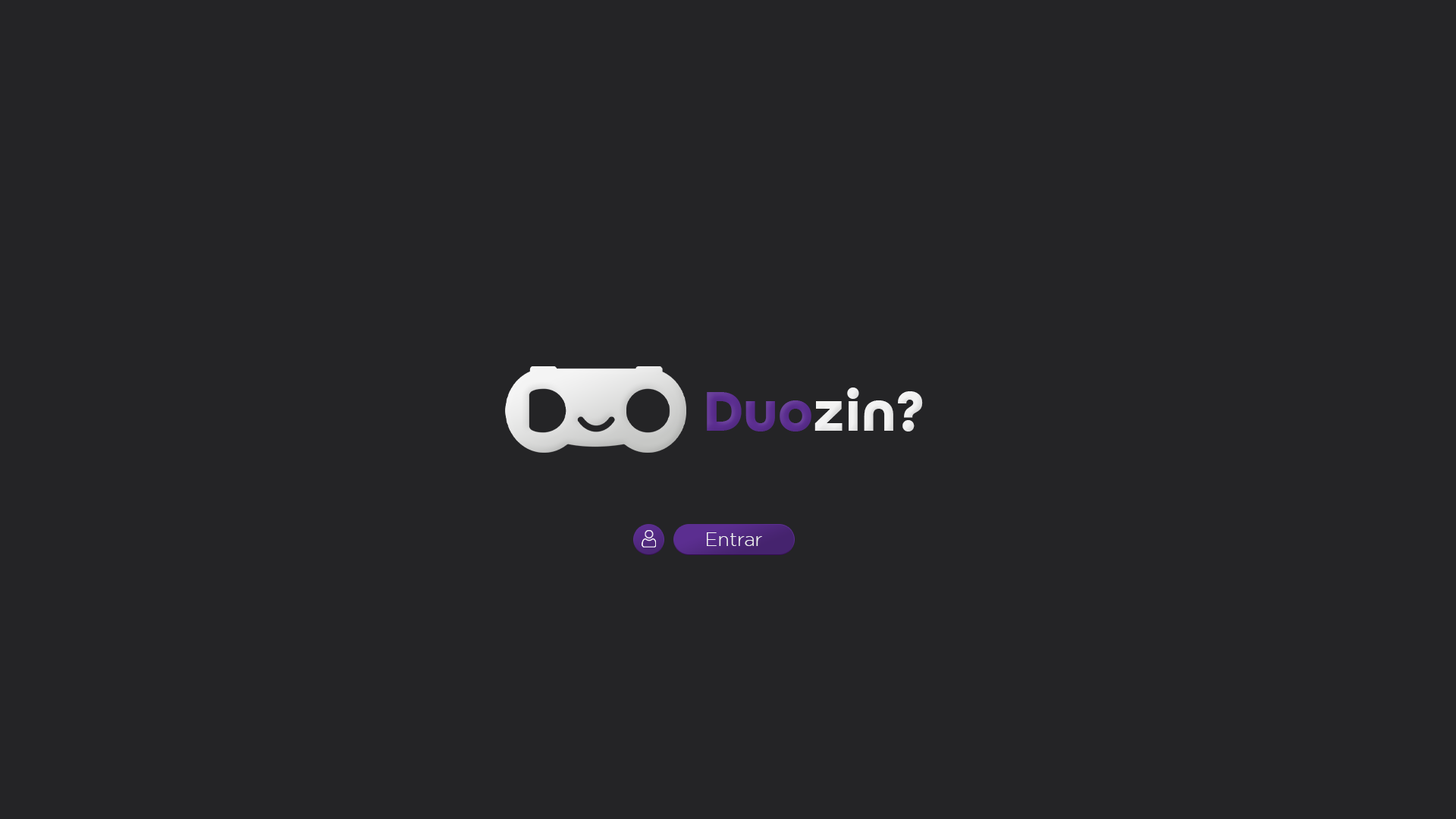
<style>
.page{position:relative;width:1456px;height:819px;background:#242426}
.page>*{position:absolute;margin:0}
.t1{font:59.5px "AllRoundGothic-Bold";color:#f2f2f2}
.t2{font:59.5px "AllRoundGothic-Bold";color:#5b2e90}
.t3{font:19.1px "Gotham-Light";color:#f2f2f2}
</style>
<div class="page">
<p class="t1" style="left:707px;top:388px;width:216px;height:43px"><span class="t2">Duo</span>zin?</p>
<p class="t3" style="left:707px;top:532px;width:55px;height:14px">Entrar</p>
</div>
